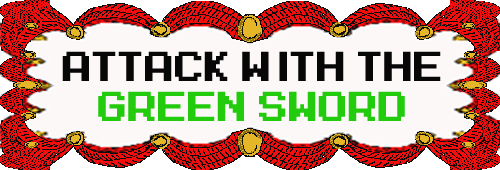
<style>
.page{position:relative;width:500px;height:170px;background:#fcf8f8}
.page>*{position:absolute;margin:0}
.t1{font:33.3px "MegaMan-2";color:#070707;scale:0.9 1}
.t2{font:33.3px "MegaMan-2";color:#23cb0d;scale:0.9 1}
</style>
<div class="page">
<p class="t1" style="left:62px;top:51px;width:379px;height:70px;text-align:center">Attack with the<br><span class="t2">green sword</span></p>
</div>
